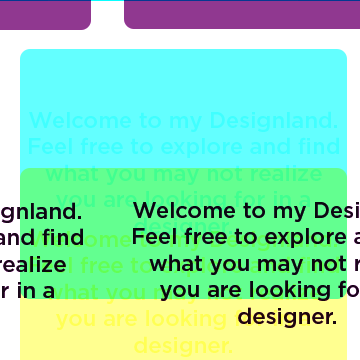
<style>
.page{position:relative;width:360px;height:360px;background:#63ffff}
.page>*{position:absolute;margin:0}
.t1{font:22px "Gotham-Medium"}
</style>
<div class="page">
<p class="t1" style="left:29px;top:110px;width:310px;height:127px;text-align:center">Welcome to my Designland.<br>Feel free to explore and find what you may not realize <br>you are looking for in a <br>designer.</p>
</div>
